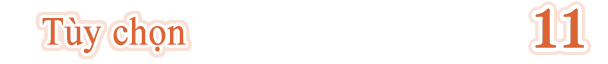
<style>
.page{position:relative;width:608px;height:64px;background:#ffffff}
.page>*{position:absolute;margin:0}
.t1{font:39.6px "TimesNewRomanPSMT";color:#dc6432;font-weight:bold;scale:0.91 1}
</style>
<div class="page">
<p class="t1" style="left:42px;top:16px;width:144px;height:38px">Tùy chọn</p>
</div>
